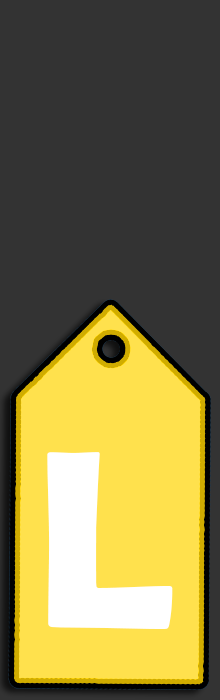
<style>
.page{position:relative;width:220px;height:700px;background:#333333}
.page>*{position:absolute;margin:0}
.t1{font:256px "BerlinSansFBDemi-Bold";letter-spacing:0.075em;color:#ffffff}
</style>
<div class="page">
<p class="t1" style="left:47px;top:452px;width:126px;height:177px">L</p>
</div>
